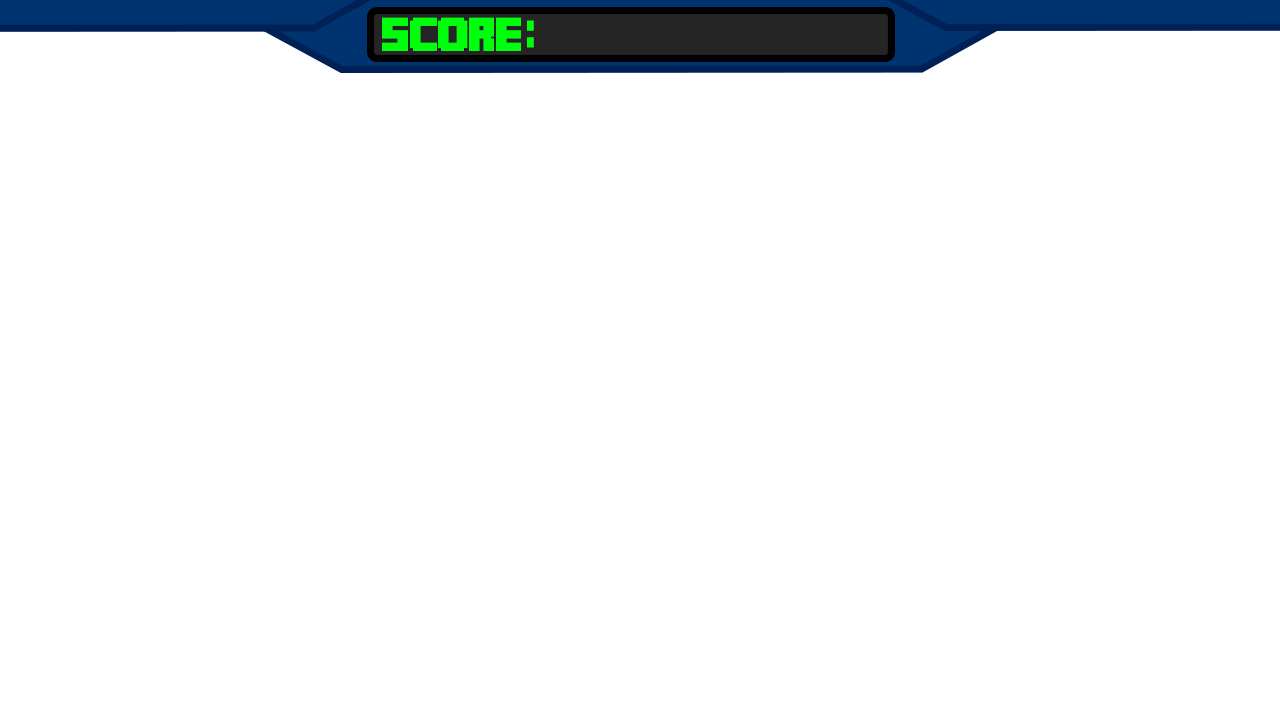
<style>
.page{position:relative;width:1280px;height:720px;background:#ffffff}
.page>*{position:absolute;margin:0}
.t1{font:33.3px "MineCrafter-3";letter-spacing:-0.04em;color:#00ff0c}
.t2{font:106.7px "MineCrafter-3";letter-spacing:-0.04em;color:#00ff0c}
</style>
<div class="page">
<p class="t1" style="left:382px;top:17px;width:139px;height:34px">Score</p>
<p class="t2" style="left:527px;top:20px;width:7px;height:28px">:</p>
</div>
